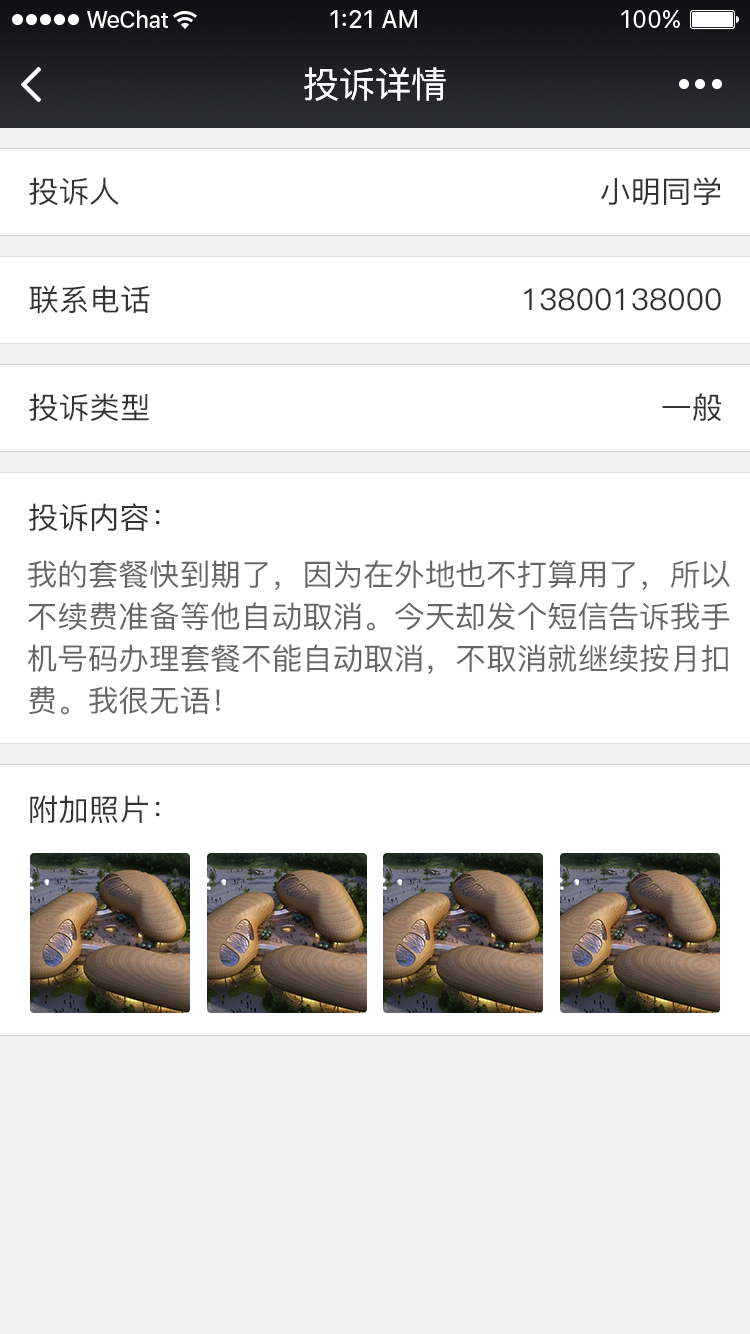
<style>
.page{position:relative;width:750px;height:1334px;background:#ffffff}
.page>*{position:absolute;margin:0}
.t1{font:36px "PingFang-SC-Medium";color:#ffffff}
.t2{font:30px "PingFang-SC-Medium";color:#333333}
.t3{font:30px/42px "PingFang-SC-Medium";color:#666666}
</style>
<div class="page">
<p class="t1" style="left:304px;top:67px;width:142px;height:34px">投诉详情</p>
<p class="t2" style="left:29px;top:177px;width:90px;height:28px">投诉人</p>
<p class="t2" style="left:601px;top:177px;width:120px;height:28px">小明同学</p>
<p class="t2" style="left:29px;top:285px;width:121px;height:29px">联系电话</p>
<p class="t2" style="left:524px;top:288px;width:197px;height:23px">13800138000</p>
<p class="t2" style="left:29px;top:393px;width:120px;height:28px">投诉类型</p>
<p class="t2" style="left:662px;top:393px;width:59px;height:28px">一般</p>
<p class="t2" style="left:28px;top:503px;width:132px;height:28px">投诉内容：</p>
<p class="t3" style="left:28px;top:560px;width:702px;height:155px">我的套餐快到期了，因为在外地也不打算用了，所以<br>不续费准备等他自动取消。今天却发个短信告诉我手<br>机号码办理套餐不能自动取消，不取消就继续按月扣<br>费。我很无语！</p>
<p class="t2" style="left:30px;top:795px;width:130px;height:29px">附加照片：</p>
</div>
